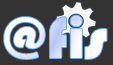
<style>
.page{position:relative;width:113px;height:65px;background:#333333}
.page>*{position:absolute;margin:0}
.t1{font:60px "Bauhaus93";color:#fefeff}
</style>
<div class="page">
<p class="t1" style="left:4px;top:15px;width:103px;height:44px">@fis</p>
</div>
